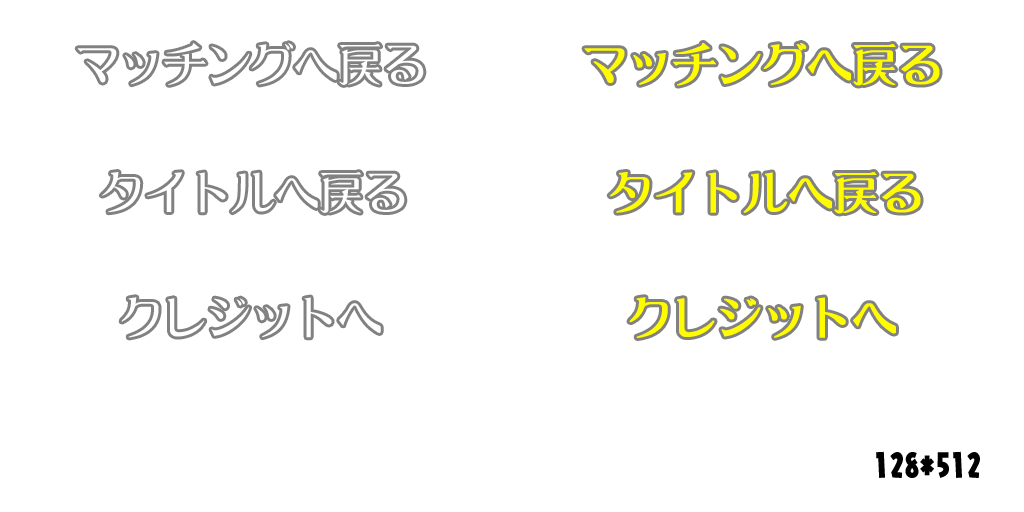
<style>
.page{position:relative;width:1024px;height:512px;background:#ffffff}
.page>*{position:absolute;margin:0}
.t1{font:43.8px "DFLeiGaSo-W5-WIN-RKSJ-H";color:#fffc00;font-weight:bold}
.t2{font:30.8px "NIS-JYA-U-83pv-RKSJ-H";color:#000000}
</style>
<div class="page">
<p class="t1" style="left:584px;top:43px;width:356px;height:43px">マッチングへ戻る</p>
<p class="t1" style="left:609px;top:172px;width:312px;height:42px">タイトルへ戻る</p>
<p class="t1" style="left:629px;top:297px;width:267px;height:41px">クレジットへ</p>
<p class="t2" style="left:876px;top:451px;width:104px;height:27px">128*512</p>
</div>
